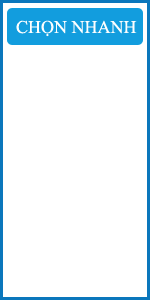
<style>
.page{position:relative;width:150px;height:300px;background:#ffffff}
.page>*{position:absolute;margin:0}
.t1{font:18px "TimesNewRomanPSMT";color:#fdfefe}
</style>
<div class="page">
<p class="t1" style="left:16px;top:20px;width:121px;height:17px">CHỌN NHANH</p>
</div>
